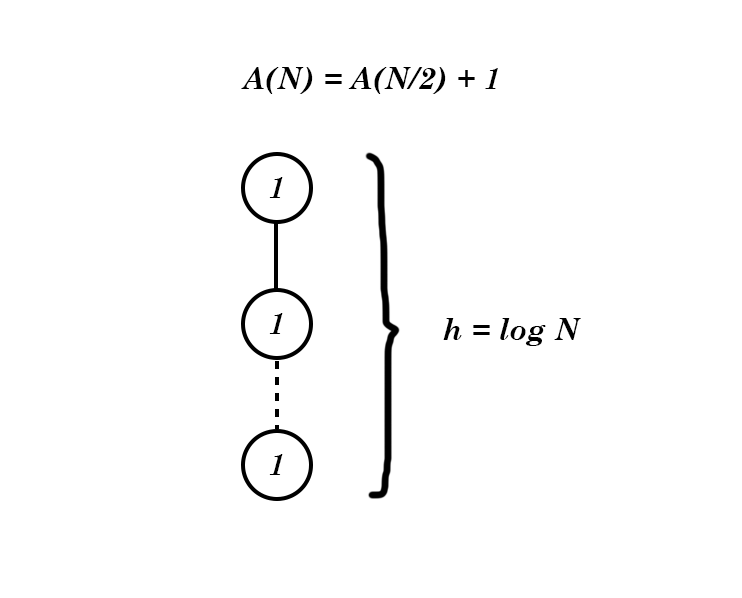
<style>
.page{position:relative;width:742px;height:598px;background:#ffffff}
.page>*{position:absolute;margin:0}
.t1{font:30px "CenturySchoolbook-BoldItalic";color:#000000}
</style>
<div class="page">
<p class="t1" style="left:241px;top:67px;width:257px;height:27px">A(N) = A(N/2) + 1</p>
<p class="t1" style="left:269px;top:177px;width:14px;height:21px">1</p>
<p class="t1" style="left:269px;top:313px;width:14px;height:21px">1</p>
<p class="t1" style="left:443px;top:318px;width:138px;height:28px">h = log N</p>
<p class="t1" style="left:269px;top:454px;width:14px;height:21px">1</p>
</div>
